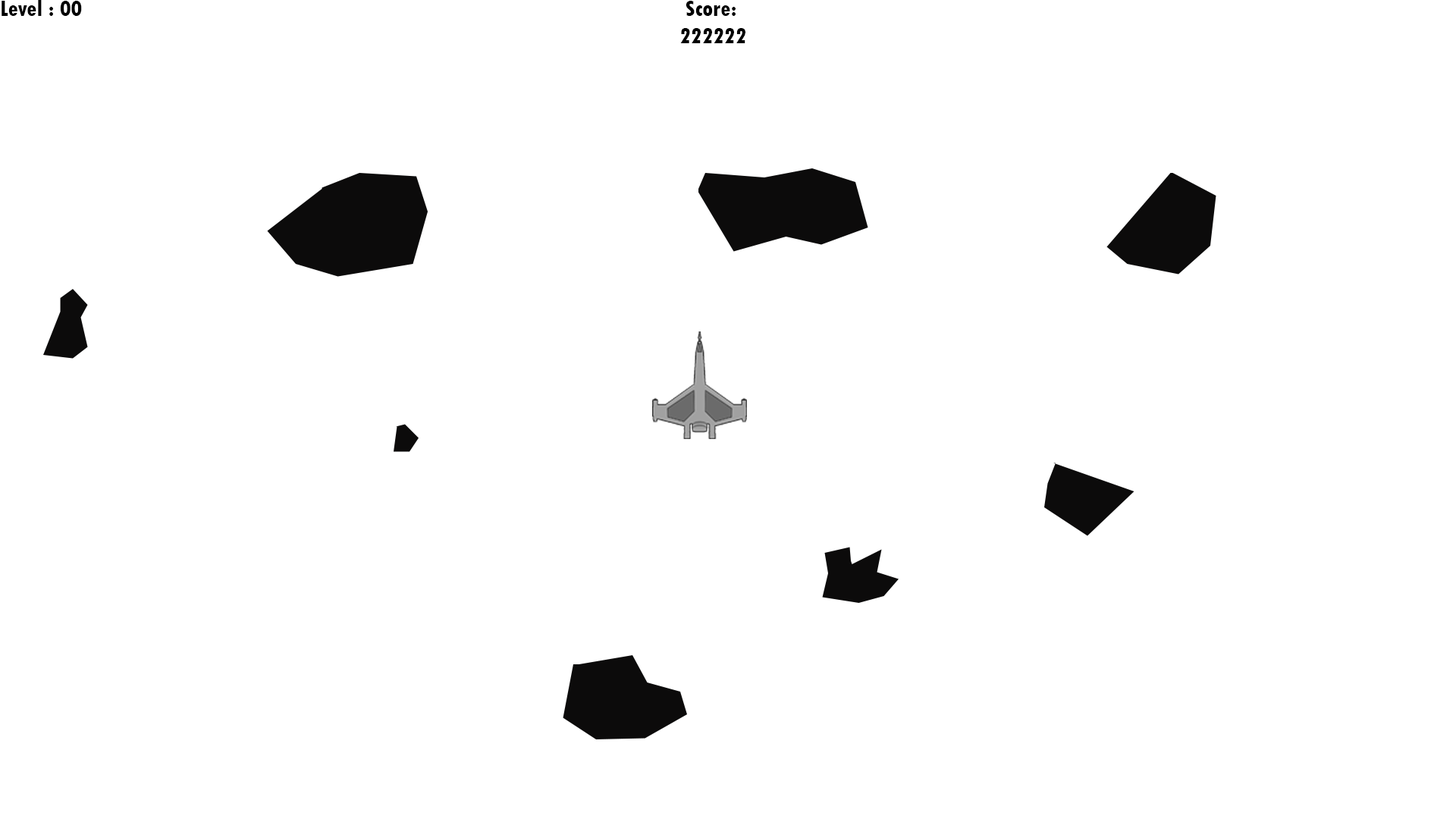
<style>
.page{position:relative;width:1456px;height:819px;background:#ffffff}
.page>*{position:absolute;margin:0}
.t1{font:22.7px "TwCenMT-CondensedExtraBold";color:#000000}
</style>
<div class="page">
<p class="t1" style="left:2px;top:0px;width:80px;height:16px">Level : 00</p>
<p class="t1" style="left:680px;top:1px;width:65px;height:42px">Score:<br> 222222</p>
</div>
